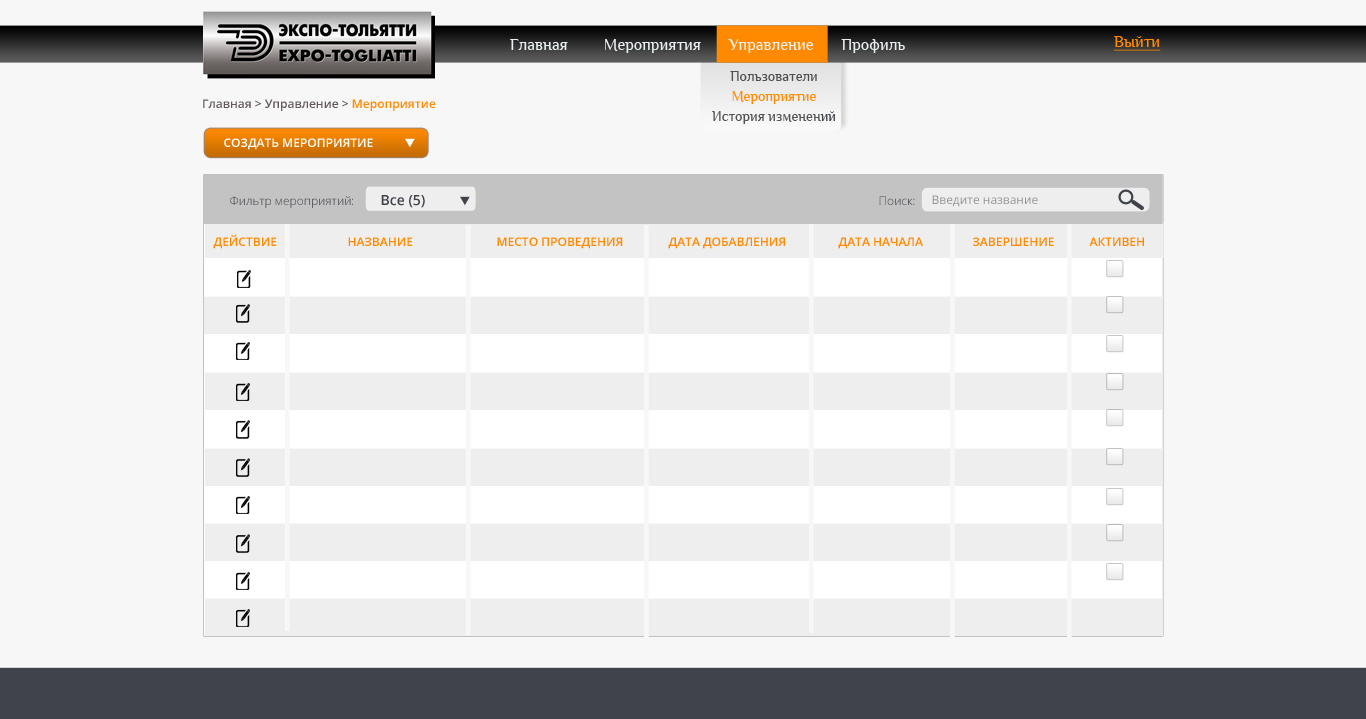
<style>
.page{position:relative;width:1366px;height:719px;background:#f7f7f7}
.page>*{position:absolute;margin:0}
.t1{font:16.5px "Philosopher";color:#e7eff1}
.t2{font:16px "Philosopher";color:#ff8a00;text-decoration:underline}
.t3{font:14.4px/20px "Philosopher";color:#525252}
.t4{font:14.4px/20px "Philosopher";color:#505050}
.t5{font:14.4px/20px "Philosopher";color:#ff8a00}
.t6{font:14.4px/20px "Philosopher";color:#40434a}
.t7{font:12px "OpenSans-Semibold";color:#615a59}
.t8{font:12px "OpenSans-Semibold";color:#ff8a00}
.t9{font:12px "OpenSans-Semibold";color:#ffffff;text-transform:uppercase}
.t10{font:12px "OpenSans-Light";color:#40434a}
.t11{font:14px "OpenSans-Semibold";color:#40434a}
.t12{font:12px "OpenSans";color:#959494}
.t13{font:12px "OpenSans-Semibold";color:#ff8a00;text-transform:uppercase}
</style>
<div class="page">
<p class="t1" style="left:510px;top:39px;width:395px;height:14px">Главная         Мероприятия       Управление       Профиль</p>
<p class="t2" style="left:1114px;top:36px;width:47px;height:15px">Выйти</p>
<p class="t3" style="left:712px;top:71px;width:123px;height:53px;text-align:center"><span class="t4">Пользователи<br></span><span class="t5">Мероприятие<br></span>История изменен<span class="t6">ий</span></p>
<p class="t7" style="left:203px;top:99px;width:233px;height:12px">Главная &gt; Управление &gt; <span class="t8">Мероприятие</span></p>
<p class="t9" style="left:224px;top:138px;width:149px;height:12px">создать мероприятие</p>
<p class="t10" style="left:230px;top:196px;width:123px;height:12px">Фильтр мероприятий:</p>
<p class="t11" style="left:381px;top:195px;width:44px;height:13px">Все (5)</p>
<p class="t10" style="left:879px;top:196px;width:36px;height:9px">Поиск:</p>
<p class="t12" style="left:932px;top:195px;width:106px;height:12px">Введите название</p>
<p class="t13" style="left:213px;top:234px;width:64px;height:15px">действие</p>
<p class="t13" style="left:348px;top:237px;width:65px;height:9px">название</p>
<p class="t13" style="left:497px;top:237px;width:126px;height:12px">место проведения</p>
<p class="t13" style="left:668px;top:237px;width:117px;height:12px">дата добавления</p>
<p class="t13" style="left:838px;top:237px;width:85px;height:12px">дата начала</p>
<p class="t13" style="left:973px;top:237px;width:81px;height:9px">завершение</p>
<p class="t13" style="left:1089px;top:237px;width:55px;height:9px">активен</p>
</div>
